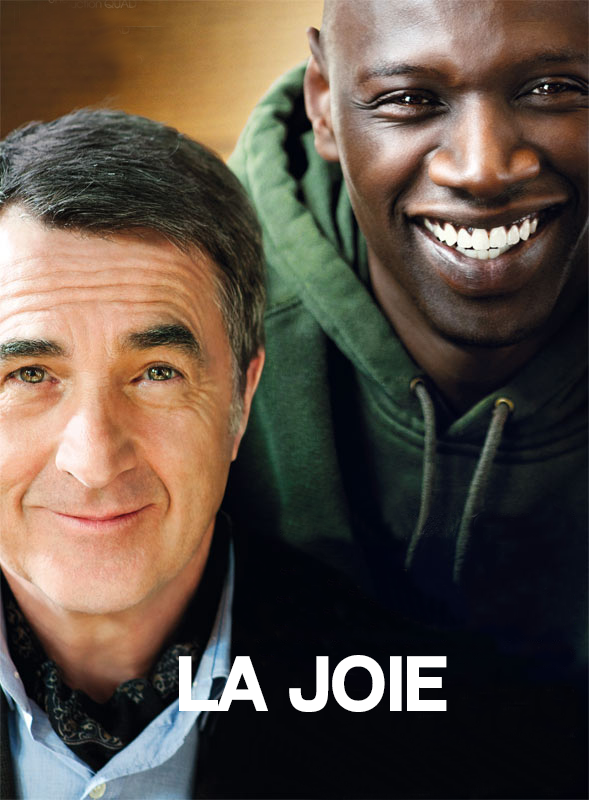
<style>
.page{position:relative;width:589px;height:800px}
.page>*{position:absolute;margin:0}
.t1{font:67.7px "NeutralFaceBold";letter-spacing:0.005em;color:#ffffff}
</style>
<div class="page">
<p class="t1" style="left:179px;top:655px;width:268px;height:57px">la joie</p>
</div>
